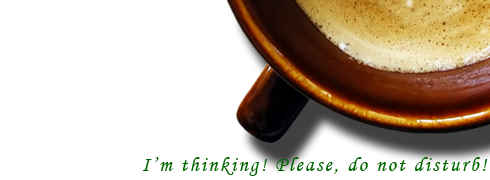
<style>
.page{position:relative;width:490px;height:180px;background:#ffffff}
.page>*{position:absolute;margin:0}
.t1{font:36px "MonotypeCorsiva";letter-spacing:0.1em;color:#006600}
</style>
<div class="page">
<p class="t1" style="left:142px;top:157px;width:346px;height:19px">I’m thinking! Please, do not disturb!</p>
</div>
